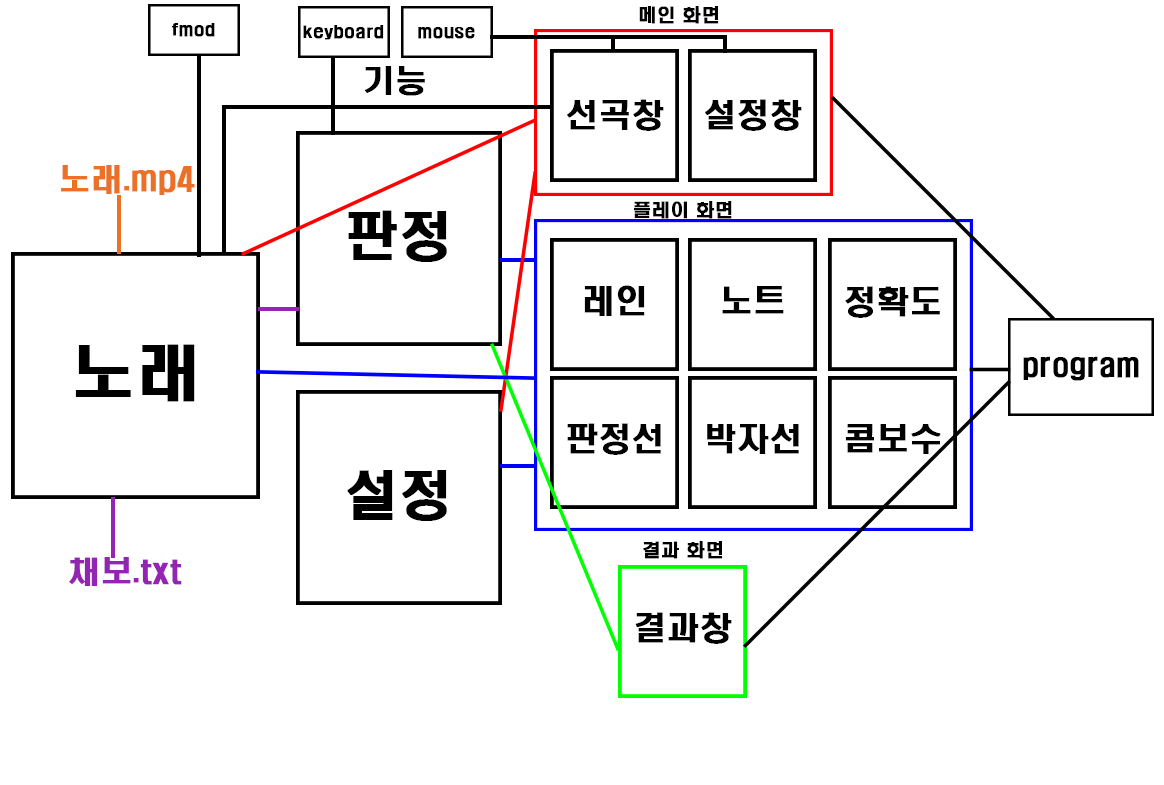
<style>
.page{position:relative;width:1164px;height:785px;background:#ffffff}
.page>*{position:absolute;margin:0}
.t1{font:17.5px "H2hdkM";color:#000000;font-weight:bold;scale:1.05 1}
.t2{font:14.7px "H2hdkM";color:#000000;font-weight:bold;scale:1.19 1}
.t3{font:7.7px "H2hdkM";color:#000000;font-weight:bold;scale:1.91 1}
.t4{font:30px "H2hdkM";color:#000000;font-weight:bold;scale:1.05 1}
.t5{font:31.6px "H2hdkM";color:#000000;font-weight:bold}
.t6{font:8.7px "H2hdkM";color:#000000;font-weight:bold}
.t7{font:30px "H2hdkM";color:#ea7125;font-weight:bold;scale:1.05 1}
.t8{font:52px "H2hdkM";color:#000000;font-weight:bold}
.t9{font:14.3px "H2hdkM";color:#000000;font-weight:bold}
.t10{font:60px "H2hdkM";color:#000000;font-weight:bold;scale:1.05 1}
.t11{font:16.5px "H2hdkM";color:#000000;font-weight:bold;scale:1.05 1}
.t12{font:28.1px "H2hdkM";color:#000000;font-weight:bold}
.t13{font:14.7px "H2hdkM";color:#000000;font-weight:bold;scale:1.6 1}
.t14{font:30px "H2hdkM";color:#9325b2;font-weight:bold;scale:1.05 1}
</style>
<div class="page">
<p class="t1" style="left:639px;top:6px;width:80px;height:18px">메인 화면</p>
<p class="t2" style="left:171px;top:23px;width:44px;height:14px"><span class="t3"><br><br></span>fmod</p>
<p class="t2" style="left:303px;top:25px;width:81px;height:15px"><span class="t3"><br><br></span>keyboard</p>
<p class="t2" style="left:418px;top:27px;width:57px;height:12px"><span class="t3"><br><br></span>mouse</p>
<p class="t4" style="left:365px;top:66px;width:60px;height:30px">기능</p>
<p class="t5" style="left:567px;top:99px;width:97px;height:32px"><span class="t6"><br><br><br><br><br></span>선곡창</p>
<p class="t5" style="left:705px;top:99px;width:97px;height:32px"><span class="t6"><br><br><br><br><br></span>설정창</p>
<p class="t7" style="left:61px;top:165px;width:134px;height:30px">노래.mp4</p>
<p class="t1" style="left:634px;top:201px;width:98px;height:18px">플레이 화면</p>
<p class="t8" style="left:348px;top:210px;width:99px;height:52px"><span class="t9"><br><br><br><br><br></span>판정</p>
<p class="t5" style="left:584px;top:285px;width:61px;height:31px"><span class="t6"><br><br><br><br><br></span>레인</p>
<p class="t5" style="left:722px;top:286px;width:62px;height:28px"><span class="t6"><br><br><br><br><br></span>노트</p>
<p class="t5" style="left:845px;top:286px;width:95px;height:32px"><span class="t6"><br><br><br><br><br></span>정확도</p>
<p class="t10" style="left:75px;top:344px;width:120px;height:58px"><span class="t11"><br><br><br><br><br></span>노래</p>
<p class="t12" style="left:1023px;top:356px;width:116px;height:25px"><span class="t13"><br><br></span>program</p>
<p class="t5" style="left:567px;top:423px;width:94px;height:32px"><span class="t6"><br><br><br><br><br></span>판정선</p>
<p class="t5" style="left:707px;top:424px;width:92px;height:30px"><span class="t6"><br><br><br><br><br></span>박자선</p>
<p class="t5" style="left:845px;top:424px;width:96px;height:30px"><span class="t6"><br><br><br><br><br></span>콤보수</p>
<p class="t8" style="left:347px;top:470px;width:100px;height:51px"><span class="t9"><br><br><br><br><br></span>설정</p>
<p class="t1" style="left:643px;top:541px;width:80px;height:18px">결과 화면</p>
<p class="t14" style="left:69px;top:557px;width:113px;height:29px">채보.txt</p>
<p class="t5" style="left:635px;top:612px;width:97px;height:32px"><span class="t6"><br><br><br><br><br></span>결과창</p>
</div>
